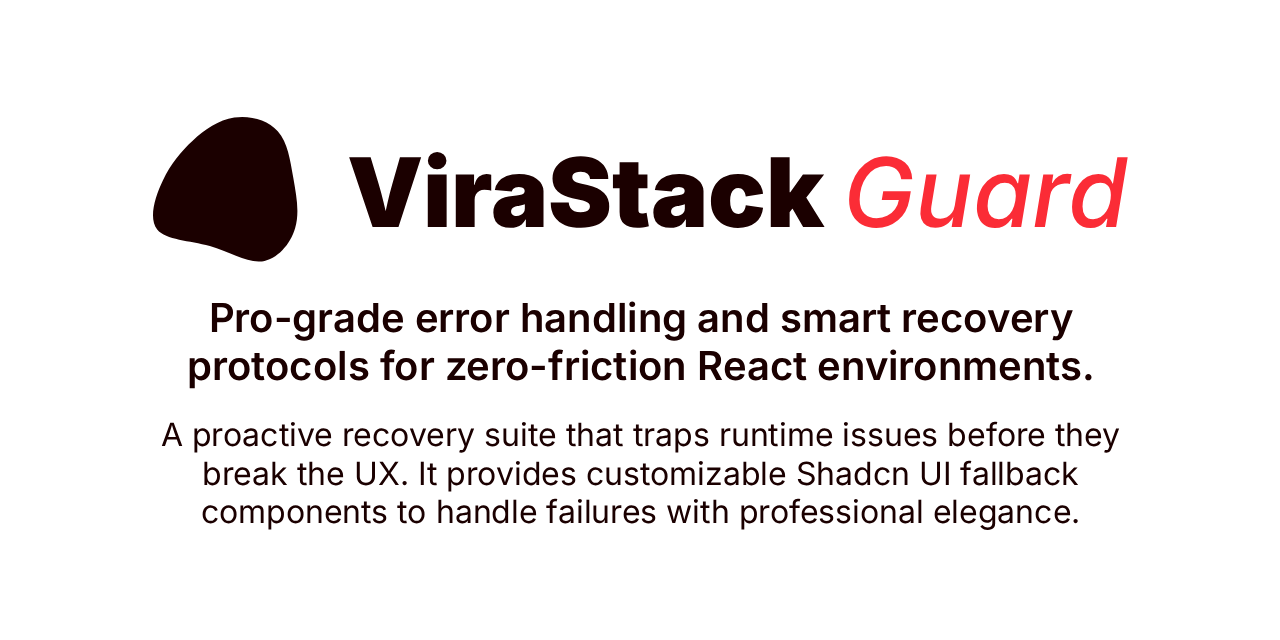
<style>
.page{position:relative;width:1280px;height:640px;background:#ffffff}
.page>*{position:absolute;margin:0}
.t1{font:96px "Inter-Black";color:#1b0000}
.t2{font:96px "Inter-MediumItalic";color:#fb2c36}
.t3{font:40px "Inter-SemiBold";color:#1b0000}
.t4{font:32px "Inter-Regular";color:#1b0000}
</style>
<div class="page">
<p class="t1" style="left:349px;top:152px;width:779px;height:77px">ViraStack <span class="t2">Guard</span></p>
<p class="t3" style="left:189px;top:301px;width:903px;height:88px;text-align:center">Pro-grade error handling and smart recovery protocols for zero-friction React environments.</p>
<p class="t4" style="left:161px;top:421px;width:959px;height:109px;text-align:center">A proactive recovery suite that traps runtime issues before they break the UX. It provides customizable Shadcn UI fallback components to handle failures with professional elegance.</p>
</div>
